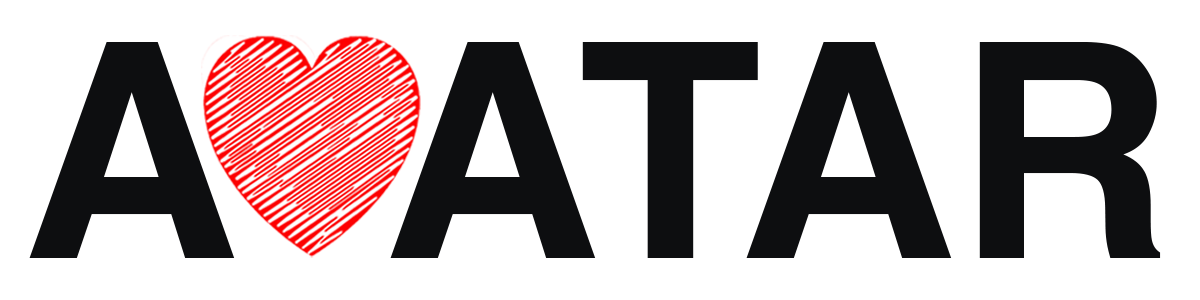
<style>
.page{position:relative;width:1200px;height:300px;background:#ffffff}
.page>*{position:absolute;margin:0}
.t1{font:300px "Helvetica-Bold";color:#0d0e10}
</style>
<div class="page">
<p class="t1" style="left:29px;top:42px;width:1132px;height:216px">A  ATAR</p>
</div>
